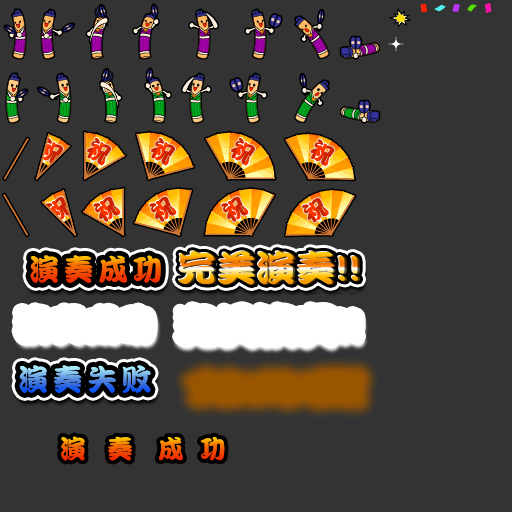
<style>
.page{position:relative;width:512px;height:512px;background:#333333}
.page>*{position:absolute;margin:0}
.t1{font:30px "DFPKanTingLiuW9";letter-spacing:0.15em}
.t2{font:36.4px "DFPKanTingLiuW9";scale:1.09 1}
.t3{font:26px "DFPKanTingLiuW9"}
</style>
<div class="page">
<p class="t1" style="left:30px;top:255px;width:131px;height:28px">演奏成功</p>
<p class="t2" style="left:178px;top:250px;width:179px;height:34px">完美演奏!!</p>
<p class="t2" style="left:179px;top:251px;width:179px;height:34px">完美演奏!!</p>
<p class="t1" style="left:19px;top:365px;width:132px;height:28px">演奏失败</p>
<p class="t3" style="left:61px;top:436px;width:24px;height:25px">演</p>
<p class="t3" style="left:108px;top:436px;width:24px;height:25px">奏</p>
<p class="t3" style="left:159px;top:437px;width:24px;height:24px">成</p>
<p class="t3" style="left:200px;top:436px;width:25px;height:25px">功</p>
</div>
